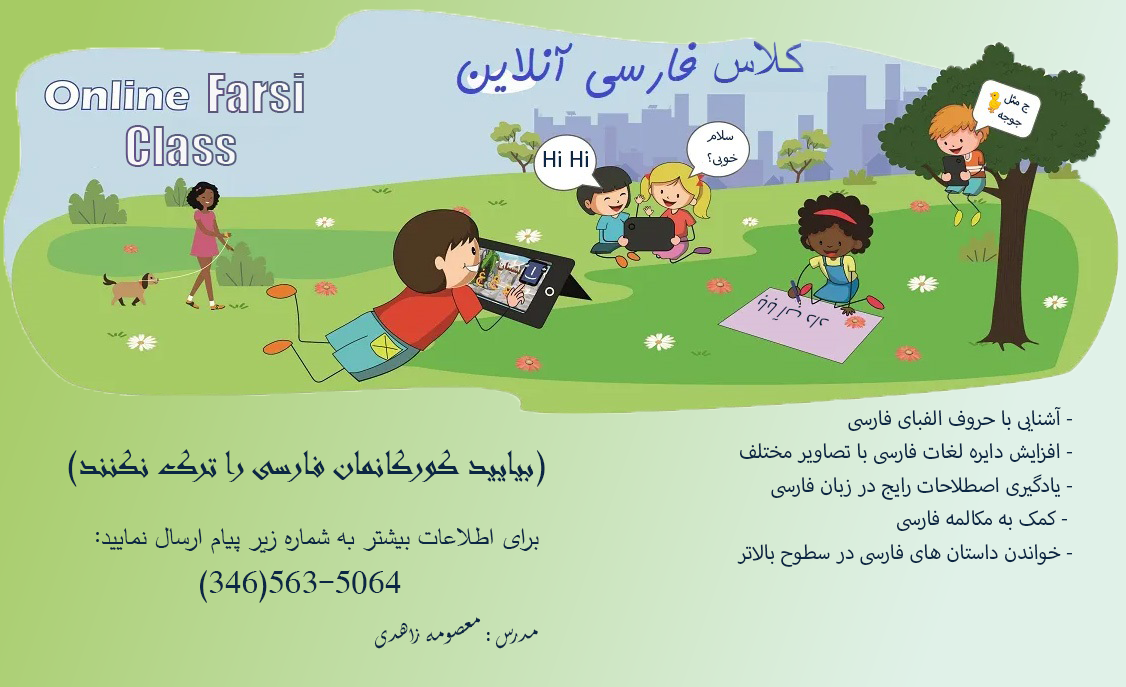
<style>
.page{position:relative;width:1126px;height:687px}
.page>*{position:absolute;margin:0}
.t1{font:27.9px "MyriadArabic-Regular";color:#0b2744}
.t2{font:37.5px "Andalus";color:#0b2744}
.t3{font:36px "Aldhabi";color:#0b2744}
.t4{font:26.7px "SimplifiedArabic";color:#0b2744}
.t5{font:31.6px "SimplifiedArabic";color:#0b2744}
.t6{font:33.1px "Aldhabi";color:#0b2744}
</style>
<div class="page">
<p class="t1" style="left:737px;top:407px;width:335px;height:160px;text-align:right">آشنایی با حروف الفبای فارسی -<br>افزایش دایره لغات فارسی با تصاویر مختلف -<br>   یادگیری اصطلاحات رایج در زبان فارسی -<br>    کمک به مکالمه فارسی - <br>خواندن داستان های فارسی در سطوح بالاتر -</p>
<p class="t2" style="left:68px;top:449px;width:477px;height:38px">(بیایید کورکانمان فارسی را ترک نکنند)</p>
<p class="t3" style="left:96px;top:532px;width:3px;height:10px">:</p>
<p class="t4" style="left:102px;top:527px;width:437px;height:27px">برای اطلاعات بیشتر به شماره زیر پیام ارسال نمایید</p>
<p class="t5" style="left:200px;top:570px;width:201px;height:33px">(346)563-5064</p>
<p class="t6" style="left:374px;top:617px;width:164px;height:32px">مدرس : معصومه زاهدی</p>
</div>
